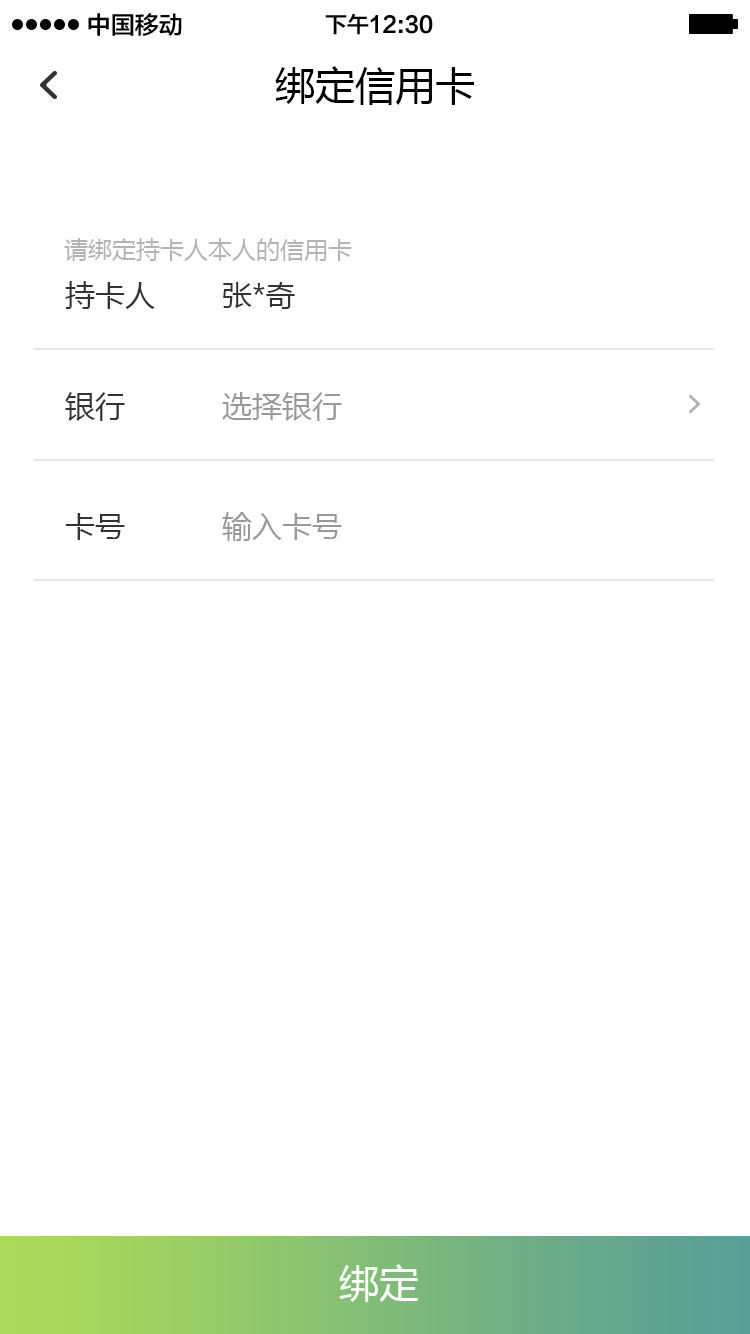
<style>
.page{position:relative;width:750px;height:1334px;background:#ffffff}
.page>*{position:absolute;margin:0}
.t1{font:24px "FZLTZHK--GBK1-0";color:#000000}
.t2{font:22px "FZLTZHK--GBK1-0";color:#000000}
.t3{font:40px "MicrosoftYaHei";color:#000000}
.t4{font:24px "MicrosoftYaHei";color:#b3b3b3}
.t5{font:30px "MicrosoftYaHei";color:#333333}
.t6{font:30px "MicrosoftYaHei";color:#999999}
.t7{font:40px "MicrosoftYaHei";color:#ffffff}
</style>
<div class="page">
<p class="t1" style="left:88px;top:13px;width:94px;height:23px">中国移动</p>
<p class="t2" style="left:325px;top:14px;width:108px;height:21px">下午12:30</p>
<p class="t3" style="left:275px;top:66px;width:199px;height:39px">绑定信用卡</p>
<p class="t4" style="left:64px;top:238px;width:288px;height:23px">请绑定持卡人本人的信用卡</p>
<p class="t5" style="left:65px;top:281px;width:90px;height:28px">持卡人</p>
<p class="t5" style="left:223px;top:282px;width:72px;height:27px">张*奇</p>
<p class="t5" style="left:65px;top:392px;width:60px;height:29px">银行</p>
<p class="t6" style="left:222px;top:392px;width:120px;height:29px">选择银行</p>
<p class="t5" style="left:65px;top:513px;width:60px;height:27px">卡号</p>
<p class="t6" style="left:222px;top:512px;width:120px;height:29px">输入卡号</p>
<p class="t7" style="left:339px;top:1264px;width:80px;height:38px">绑定</p>
</div>
